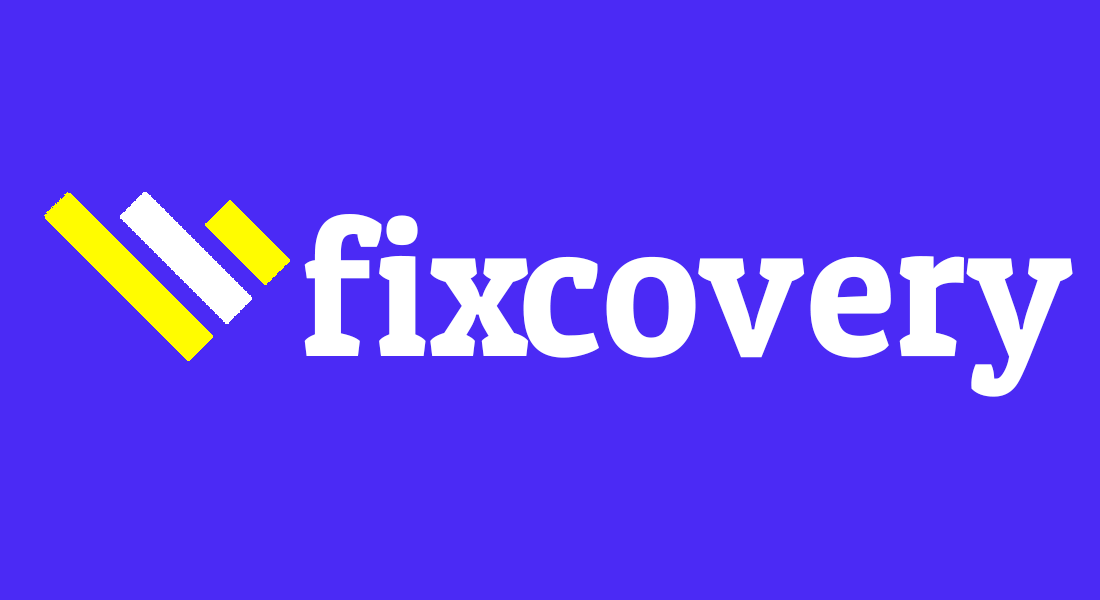
<style>
.page{position:relative;width:1100px;height:600px;background:#4b2af5}
.page>*{position:absolute;margin:0}
.t1{font:195.2px "PatuaOne-Regular";color:#ffffff;scale:0.95 1}
</style>
<div class="page">
<p class="t1" style="left:304px;top:214px;width:225px;height:142px">fix</p>
<p class="t1" style="left:523px;top:256px;width:550px;height:141px">covery</p>
</div>
